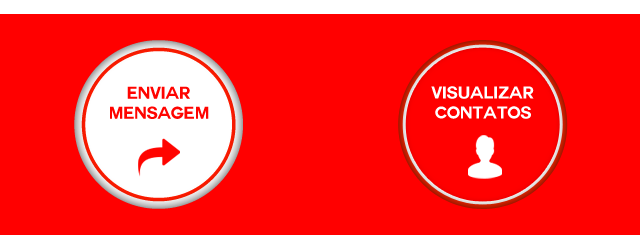
<style>
.page{position:relative;width:640px;height:249px;background:#ff0000}
.page>*{position:absolute;margin:0}
.t1{font:16.7px "COUTURE-Bold";color:#ff0400;text-transform:uppercase}
.t2{font:16.7px "COUTURE-Bold";color:#ffffff;text-transform:uppercase}
</style>
<div class="page">
<p class="t1" style="left:110px;top:86px;width:99px;height:33px;text-align:center">enviar<br>mensagem</p>
<p class="t2" style="left:431px;top:86px;width:103px;height:33px;text-align:center">Visualizar<br>contatos</p>
</div>
